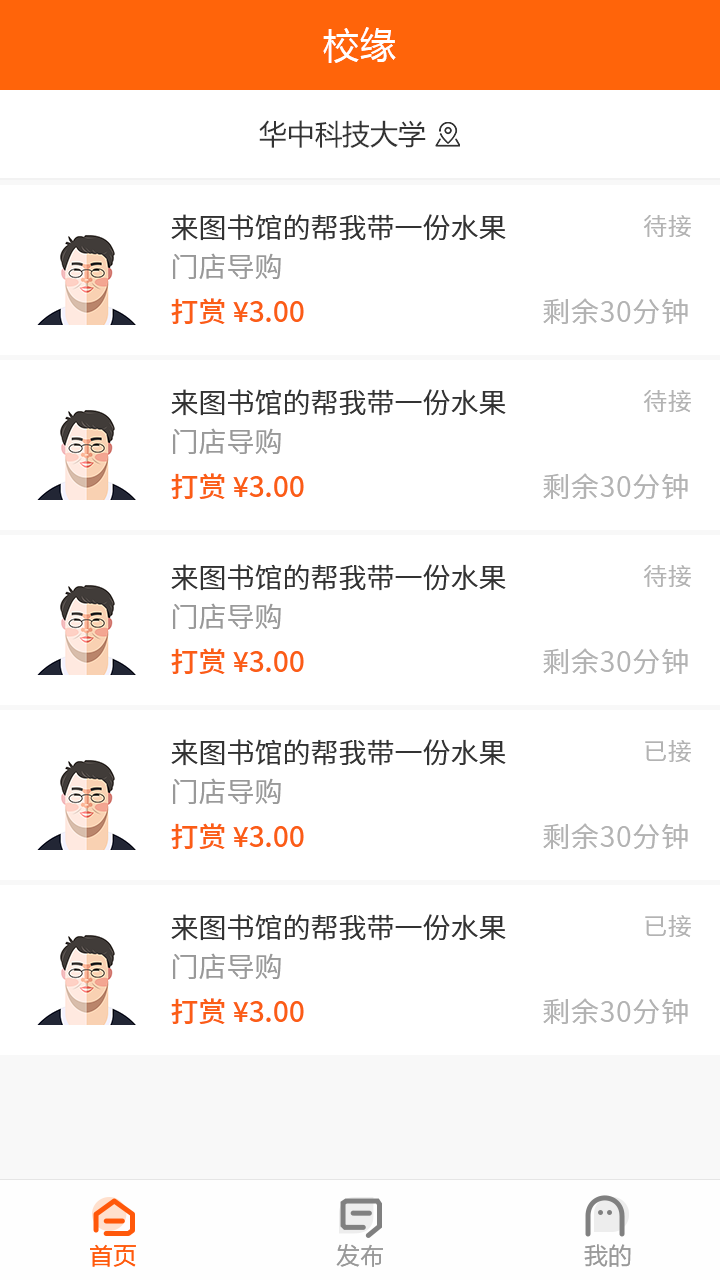
<style>
.page{position:relative;width:720px;height:1280px;background:#ffffff}
.page>*{position:absolute;margin:0}
.t1{font:36px "MicrosoftYaHei";letter-spacing:0.03em;color:#ffffff}
.t2{font:28px "MicrosoftYaHei";color:#333333}
.t3{font:28px "NotoSansCJKsc-DemiLight";color:#333333;font-variant:small-caps}
.t4{font:24px "NotoSansCJKsc-DemiLight";letter-spacing:0.03em;color:#b3b3b3;font-variant:small-caps}
.t5{font:28px "NotoSansCJKsc-DemiLight";color:#999999;font-variant:small-caps}
.t6{font:28px "NotoSansCJKsc-Medium";color:#fb5d15;font-variant:small-caps}
.t7{font:28px "NotoSansCJKsc-DemiLight";letter-spacing:0.03em;color:#b3b3b3;font-variant:small-caps}
.t8{font:24px "FZLTHJW--GB1-0";color:#ff580a}
.t9{font:24px "FZLTHJW--GB1-0";color:#999999}
</style>
<div class="page">
<p class="t1" style="left:323px;top:27px;width:73px;height:36px">校缘</p>
<p class="t2" style="left:259px;top:120px;width:167px;height:28px">华中科技大学</p>
<p class="t3" style="left:171px;top:214px;width:335px;height:27px">来图书馆的帮我带一份水果</p>
<p class="t4" style="left:643px;top:215px;width:48px;height:23px">待接</p>
<p class="t5" style="left:173px;top:253px;width:108px;height:26px">门店导购</p>
<p class="t6" style="left:171px;top:298px;width:133px;height:26px">打赏 ¥3.00</p>
<p class="t7" style="left:543px;top:298px;width:145px;height:26px">剩余30分钟</p>
<p class="t3" style="left:171px;top:389px;width:335px;height:27px">来图书馆的帮我带一份水果</p>
<p class="t4" style="left:643px;top:390px;width:48px;height:23px">待接</p>
<p class="t5" style="left:173px;top:428px;width:108px;height:26px">门店导购</p>
<p class="t6" style="left:171px;top:473px;width:133px;height:26px">打赏 ¥3.00</p>
<p class="t7" style="left:543px;top:473px;width:145px;height:26px">剩余30分钟</p>
<p class="t3" style="left:171px;top:564px;width:335px;height:27px">来图书馆的帮我带一份水果</p>
<p class="t4" style="left:643px;top:565px;width:48px;height:23px">待接</p>
<p class="t5" style="left:173px;top:603px;width:108px;height:26px">门店导购</p>
<p class="t6" style="left:171px;top:648px;width:133px;height:26px">打赏 ¥3.00</p>
<p class="t7" style="left:543px;top:648px;width:145px;height:26px">剩余30分钟</p>
<p class="t3" style="left:171px;top:739px;width:335px;height:27px">来图书馆的帮我带一份水果</p>
<p class="t4" style="left:645px;top:740px;width:46px;height:23px">已接</p>
<p class="t5" style="left:173px;top:778px;width:108px;height:26px">门店导购</p>
<p class="t6" style="left:171px;top:823px;width:133px;height:26px">打赏 ¥3.00</p>
<p class="t7" style="left:543px;top:823px;width:145px;height:26px">剩余30分钟</p>
<p class="t3" style="left:171px;top:914px;width:335px;height:27px">来图书馆的帮我带一份水果</p>
<p class="t4" style="left:645px;top:915px;width:46px;height:23px">已接</p>
<p class="t5" style="left:173px;top:953px;width:108px;height:26px">门店导购</p>
<p class="t6" style="left:171px;top:998px;width:133px;height:26px">打赏 ¥3.00</p>
<p class="t7" style="left:543px;top:998px;width:145px;height:26px">剩余30分钟</p>
<p class="t8" style="left:90px;top:1244px;width:46px;height:23px">首页</p>
<p class="t9" style="left:336px;top:1244px;width:47px;height:23px">发布</p>
<p class="t9" style="left:584px;top:1244px;width:47px;height:23px">我的</p>
</div>
